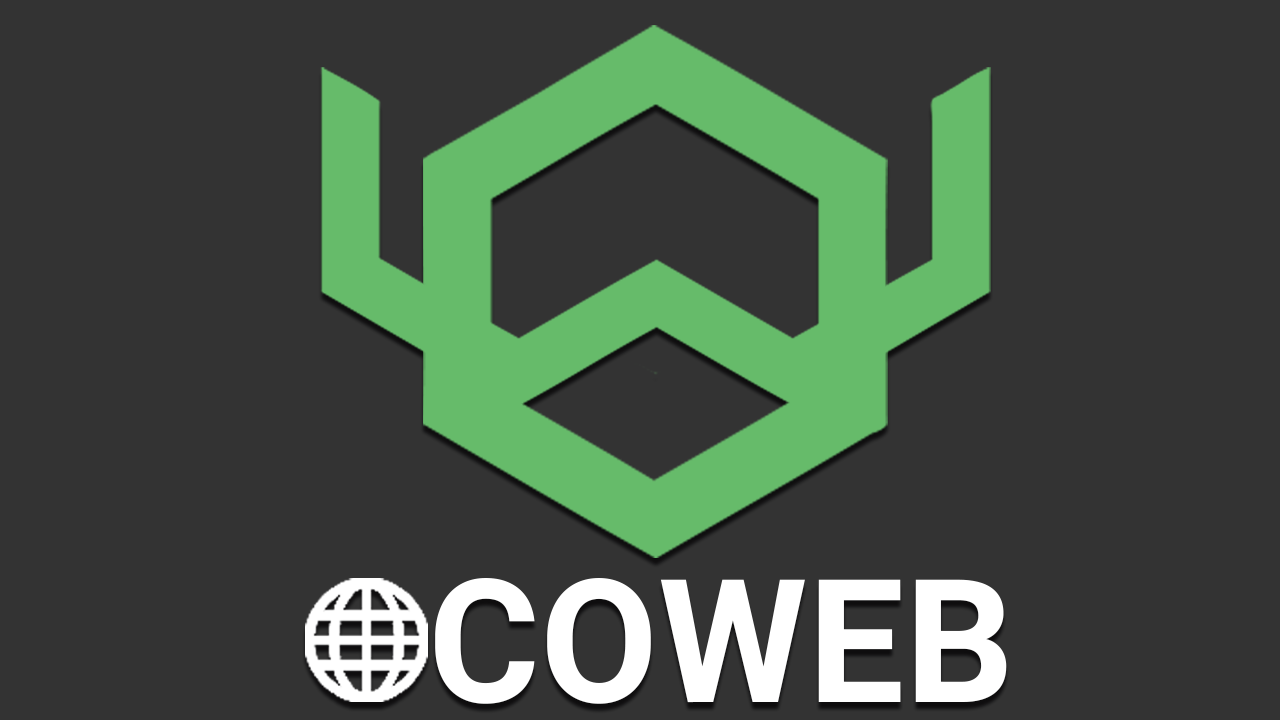
<style>
.page{position:relative;width:1280px;height:720px;background:#333333}
.page>*{position:absolute;margin:0}
.t1{font:172.5px "Roboto-Bold";color:#ffffff}
</style>
<div class="page">
<p class="t1" style="left:435px;top:578px;width:572px;height:126px">COWEB</p>
</div>
